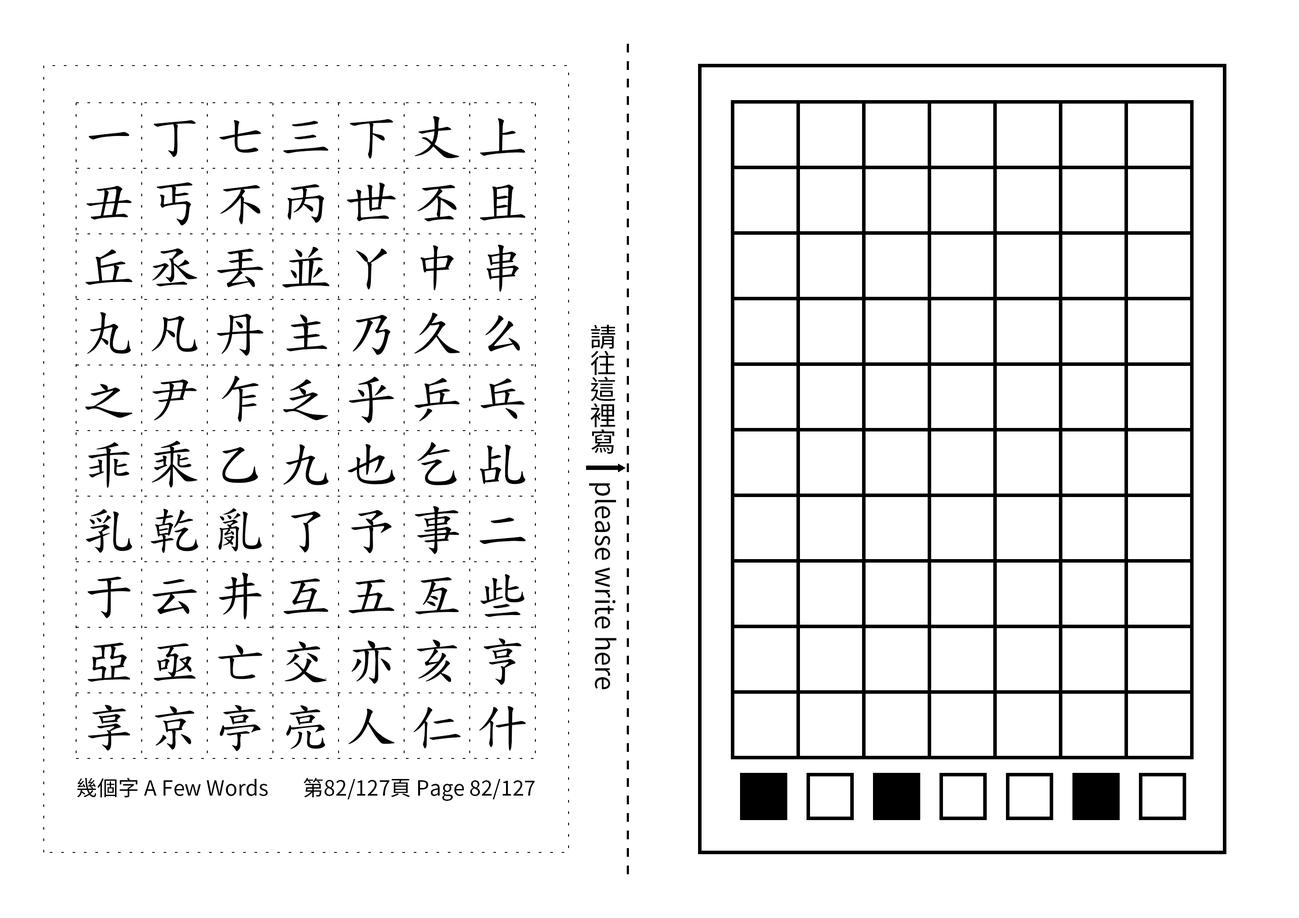
<style>
.page{position:relative;width:1299px;height:918px;background:#ffffff}
.page>*{position:absolute;margin:0}
.t1{font:52.5px/65.6px "TW-Kai-98_1";letter-spacing:0.25em;color:#000000}
.t2{font:26.2px "SourceHanSansTC-Regular";color:#000000}
.t3{font:21px "SourceHanSansTC-Regular";color:#000000}
</style>
<div class="page">
<p class="t1" style="left:85px;top:116px;width:441px;height:636px;text-align:center">一丁七三下丈上丑丐不丙世丕且丘丞丟並丫中串丸凡丹主乃久么之尹乍乏乎乒乓乖乘乙九也乞乩乳乾亂了予事二于云井互五亙些亞亟亡交亦亥亨享京亭亮人仁什</p>
<p class="t2" style="left:589px;top:324px;width:28px;height:366px;text-align:center">請往這裡寫　please write here</p>
<p class="t3" style="left:77px;top:778px;width:191px;height:20px">幾個字 A Few Words</p>
<p class="t3" style="left:303px;top:778px;width:232px;height:23px">第82/127頁 Page 82/127</p>
</div>
